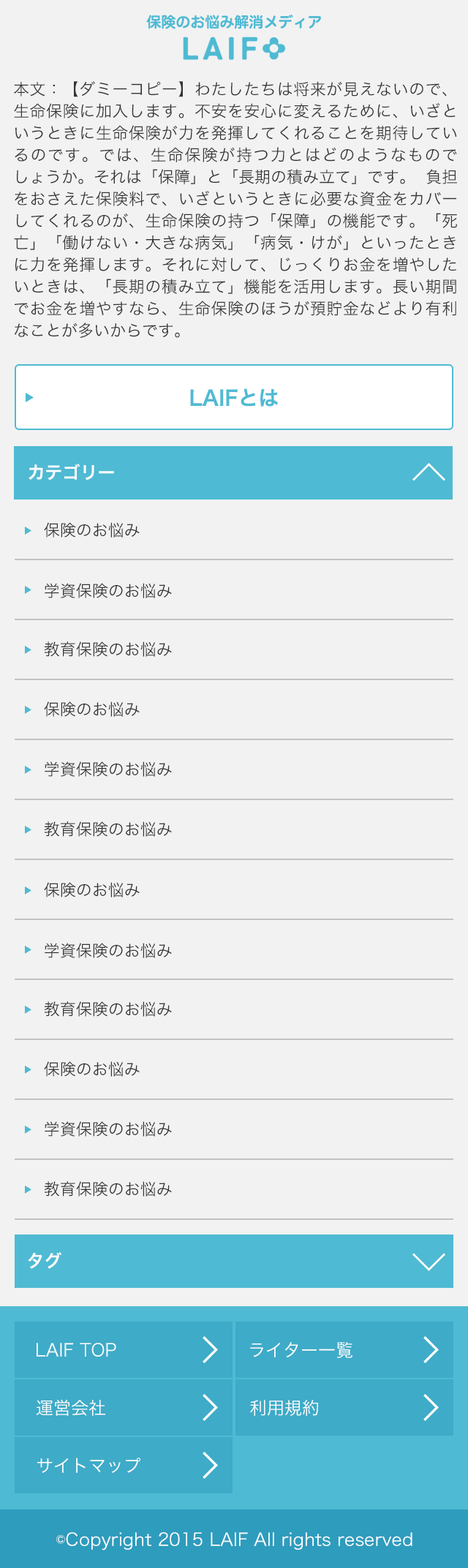
<style>
.page{position:relative;width:468px;height:1568px;background:#f2f2f2}
.page>*{position:absolute;margin:0}
.t1{font:14.6px "HiraMaruStdN-W6";color:#50bad4}
.t2{font:16.1px/21.9px "HiraKakuPro-W3";color:#333333}
.t3{font:20.5px "HiraKakuPro-W6";color:#4fbad3}
.t4{font:17.6px "HiraKakuPro-W6";color:#ffffff}
.t5{font:16.1px "HiraKakuPro-W3";color:#333333}
.t6{font:17.6px "HiraKakuPro-W3";color:#ffffff}
</style>
<div class="page">
<p class="t1" style="left:146px;top:14px;width:175px;height:15px">保険のお悩み解消メディア</p>
<p class="t2" style="left:14px;top:81px;width:443px;height:257px;text-align:justify">本文：【ダミーコピー】わたしたちは将来が見えないので、生命保険に加入します。不安を安心に変えるために、いざというときに生命保険が力を発揮してくれることを期待しているのです。では、生命保険が持つ力とはどのようなものでしょうか。それは「保障」と「長期の積み立て」です。負担をおさえた保険料で、いざというときに必要な資金をカバーしてくれるのが、生命保険の持つ「保障」の機能です。「死亡」「働けない・大きな病気」「病気・けが」といったときに力を発揮します。それに対して、じっくりお金を増やしたいときは、「長期の積み立て」機能を活用します。長い期間でお金を増やすなら、生命保険のほうが預貯金などより有利なことが多いからです。</p>
<p class="t3" style="left:190px;top:388px;width:88px;height:19px">LAIFとは</p>
<p class="t4" style="left:29px;top:464px;width:85px;height:16px">カテゴリー</p>
<p class="t5" style="left:44px;top:522px;width:96px;height:16px">保険のお悩み</p>
<p class="t5" style="left:45px;top:583px;width:127px;height:15px">学資保険のお悩み</p>
<p class="t5" style="left:44px;top:641px;width:128px;height:16px">教育保険のお悩み</p>
<p class="t5" style="left:44px;top:701px;width:96px;height:16px">保険のお悩み</p>
<p class="t5" style="left:45px;top:761px;width:127px;height:16px">学資保険のお悩み</p>
<p class="t5" style="left:44px;top:821px;width:128px;height:16px">教育保険のお悩み</p>
<p class="t5" style="left:44px;top:882px;width:96px;height:15px">保険のお悩み</p>
<p class="t5" style="left:45px;top:943px;width:127px;height:15px">学資保険のお悩み</p>
<p class="t5" style="left:44px;top:1001px;width:128px;height:16px">教育保険のお悩み</p>
<p class="t5" style="left:44px;top:1061px;width:96px;height:16px">保険のお悩み</p>
<p class="t5" style="left:45px;top:1121px;width:127px;height:16px">学資保険のお悩み</p>
<p class="t5" style="left:44px;top:1181px;width:128px;height:15px">教育保険のお悩み</p>
<p class="t4" style="left:28px;top:1252px;width:33px;height:17px">タグ</p>
<p class="t6" style="left:36px;top:1343px;width:80px;height:14px">LAIF TOP</p>
<p class="t6" style="left:250px;top:1342px;width:103px;height:16px">ライター一覧</p>
<p class="t6" style="left:36px;top:1399px;width:69px;height:17px">運営会社</p>
<p class="t6" style="left:250px;top:1400px;width:69px;height:16px">利用規約</p>
<p class="t6" style="left:37px;top:1458px;width:103px;height:15px">サイトマップ</p>
<p class="t6" style="left:56px;top:1532px;width:356px;height:18px">©Copyright 2015 LAIF All rights reserved</p>
</div>
